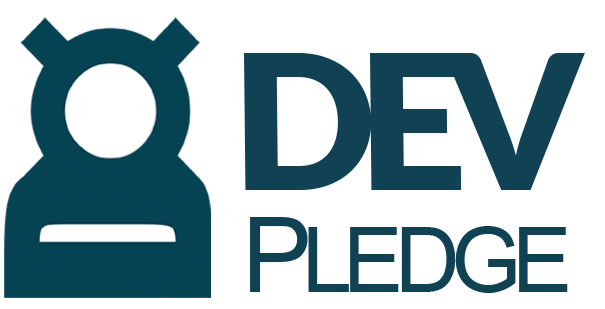
<style>
.page{position:relative;width:605px;height:309px;background:#ffffff}
.page>*{position:absolute;margin:0}
.t1{font:188.3px "Lato-Black";letter-spacing:-0.1em;color:#114253}
.t2{font:90.5px "ArialMT";letter-spacing:-0.1em;color:#114253}
.t3{font:105.2px "ArialMT";letter-spacing:-0.1em;color:#114253}
</style>
<div class="page">
<p class="t1" style="left:244px;top:53px;width:341px;height:137px">DEV</p>
<p class="t2" style="left:250px;top:217px;width:318px;height:76px"><span class="t3">P</span>LEDGE</p>
</div>
